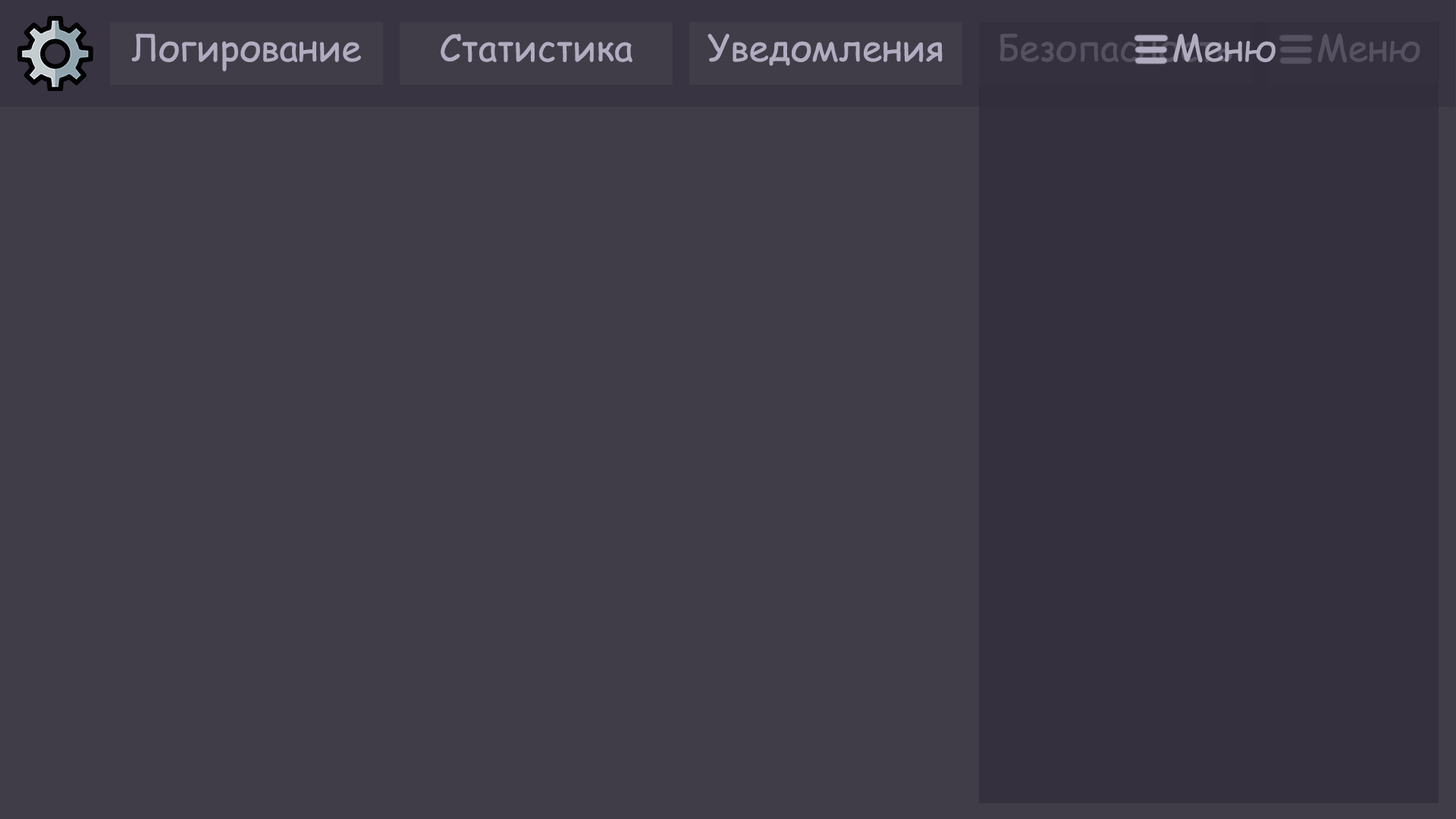
<style>
.page{position:relative;width:1456px;height:819px;background:#403d49}
.page>*{position:absolute;margin:0}
.t1{font:36.4px "ComicSansMS";color:#b2acc0}
.t2{font:36.4px "MyriadPro-Regular";color:#b2acc0}
.t3{font:36.4px "ComicSansMS";color:#565161}
.t4{font:36.4px "MyriadPro-Regular";color:#565161}
</style>
<div class="page">
<p class="t1" style="left:131px;top:33px;width:230px;height:38px">Логирование</p>
<p class="t1" style="left:441px;top:33px;width:191px;height:29px">Статистика</p>
<p class="t1" style="left:708px;top:33px;width:235px;height:33px">Уведомления</p>
<p class="t1" style="left:1173px;top:33px;width:102px;height:30px"><span class="t2">    </span>Меню</p>
<p class="t3" style="left:1318px;top:33px;width:102px;height:30px"><span class="t4">    </span>Меню</p>
</div>
